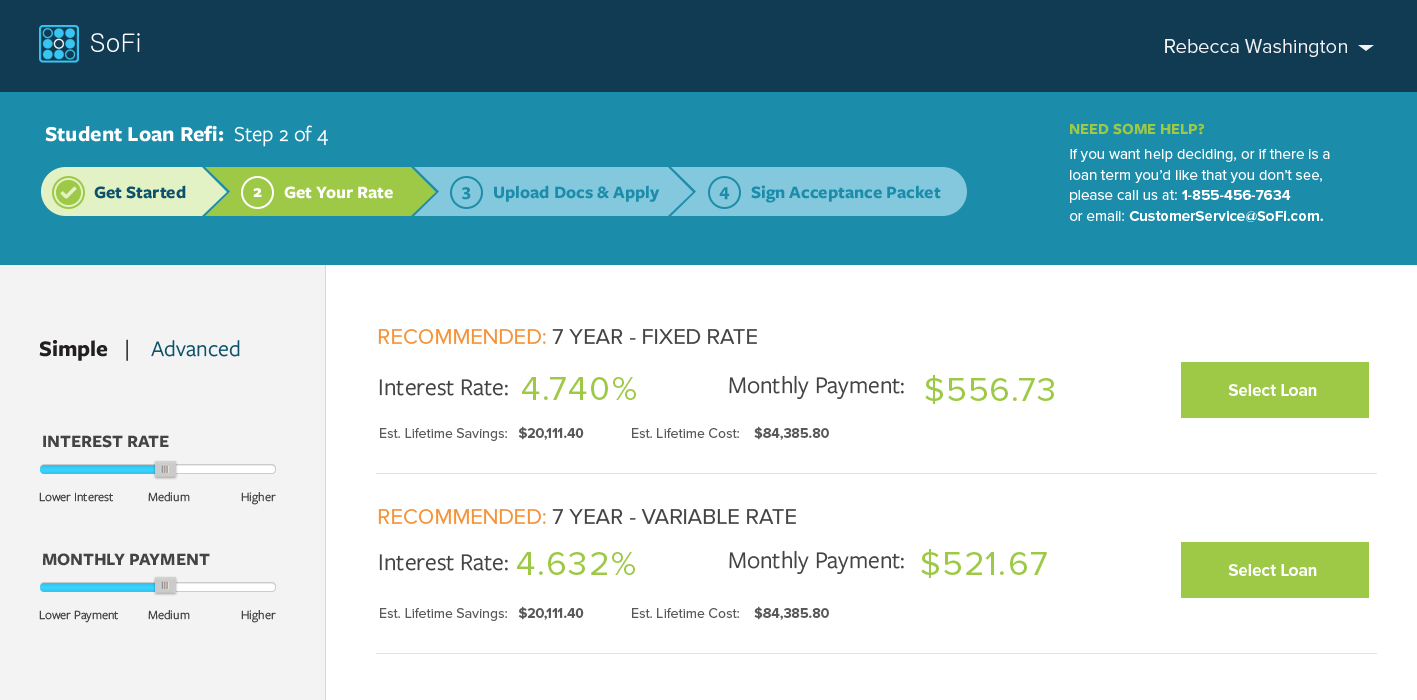
<style>
.page{position:relative;width:1417px;height:700px;background:#ffffff}
.page>*{position:absolute;margin:0}
.t1{font:20px "ProximaNova-Regular";color:#f3f3f3}
.t2{font:22.1px "FreightSansProBold-Regular";color:#ffffff}
.t3{font:22.1px "FreightSansProBook-Regular";color:#ffffff}
.t4{font:16px "FreightSansProBold-Regular";color:#9dc947;text-transform:uppercase}
.t5{font:15px/20.5px "ProximaNova-Regular";color:#ffffff}
.t6{font:15px/20.5px "ProximaNova-Bold";color:#ffffff}
.t7{font:18.1px "FreightSansProBold-Regular";color:#0c526a}
.t8{font:18.1px "FreightSansProBold-Regular";color:#1b8caa}
.t9{font:18.1px "FreightSansProBold-Regular";letter-spacing:0.04em;color:#ffffff}
.t10{font:18.1px "FreightSansProBold-Regular";color:#ffffff}
.t11{font:18.1px "FreightSansProBold-Regular";letter-spacing:0.04em;color:#1b8caa}
.t12{font:22px "ProximaNova-Regular";color:#444444}
.t13{font:22px "ProximaNova-Regular";color:#f59339;text-transform:uppercase}
.t14{font:23px "FreightSansProBook-Regular";color:#0c526a}
.t15{font:23px "FreightSansProBold-Regular";color:#231f20}
.t16{font:23px "FreightSansProBook-Regular";color:#231f20}
.t17{font:34.6px "ProximaNova-Regular";letter-spacing:0.04em;color:#9dc947}
.t18{font:24.9px "FreightSansProBook-Regular";color:#444444}
.t19{font:17px "ProximaNova-Bold";color:#ffffff}
.t20{font:18px "FreightSansProBold-Regular";color:#444444}
.t21{font:14px "ProximaNova-Regular";color:#595959}
.t22{font:14px "ProximaNova-Bold";color:#595959}
.t23{font:13px "FreightSansProBook-Regular";color:#444444}
</style>
<div class="page">
<p class="t1" style="left:1165px;top:39px;width:182px;height:18px">Rebecca Washington</p>
<p class="t2" style="left:45px;top:125px;width:283px;height:22px">Student Loan Refi:  <span class="t3">Step 2 of 4</span></p>
<p class="t4" style="left:1070px;top:123px;width:135px;height:12px">need some help?</p>
<p class="t5" style="left:1070px;top:149px;width:260px;height:73px">If you want help deciding, or if there is a loan term you’d like that you don’t see, please call us at: <span class="t6">1-855-456-7634</span> <br>or email: <span class="t6">CustomerService@SoFi.com.</span></p>
<p class="t7" style="left:94px;top:185px;width:92px;height:14px">Get Started</p>
<p class="t8" style="left:494px;top:185px;width:166px;height:17px">Upload Docs &amp; Apply</p>
<p class="t8" style="left:751px;top:185px;width:190px;height:18px">Sign Acceptance Packet</p>
<p class="t9" style="left:253px;top:188px;width:9px;height:9px">2</p>
<p class="t10" style="left:284px;top:186px;width:109px;height:13px">Get Your Rate</p>
<p class="t11" style="left:462px;top:187px;width:9px;height:13px">3</p>
<p class="t11" style="left:719px;top:187px;width:11px;height:13px">4</p>
<p class="t12" style="left:378px;top:329px;width:379px;height:15px"><span class="t13">Recommended: </span>7 YEAR - FIXED RATE</p>
<p class="t14" style="left:39px;top:339px;width:201px;height:22px"><span class="t15">Simple </span><span class="t16">  |    </span>Advanced</p>
<p class="t17" style="left:522px;top:377px;width:114px;height:23px">4.740%</p>
<p class="t18" style="left:729px;top:375px;width:175px;height:24px">Monthly Payment:</p>
<p class="t17" style="left:925px;top:375px;width:129px;height:29px">$556.73</p>
<p class="t18" style="left:379px;top:379px;width:129px;height:17px">Interest Rate:</p>
<p class="t19" style="left:1228px;top:384px;width:89px;height:12px">Select Loan</p>
<p class="t20" style="left:43px;top:435px;width:126px;height:13px">INTEREST RATE</p>
<p class="t21" style="left:380px;top:426px;width:449px;height:15px">Est. Lifetime Savings:   <span class="t22">$20,111.40</span>             Est. Lifetime Cost:    <span class="t22">$84,385.80</span></p>
<p class="t23" style="left:39px;top:492px;width:74px;height:10px">Lower Interest</p>
<p class="t23" style="left:148px;top:492px;width:42px;height:10px">Medium</p>
<p class="t23" style="left:241px;top:492px;width:35px;height:13px">Higher</p>
<p class="t12" style="left:378px;top:509px;width:418px;height:15px"><span class="t13">Recommended: </span>7 YEAR - VARIABLE RATE</p>
<p class="t20" style="left:43px;top:553px;width:167px;height:13px">MONTHLY PAYMENT</p>
<p class="t18" style="left:379px;top:554px;width:129px;height:17px">Interest Rate:</p>
<p class="t17" style="left:517px;top:552px;width:118px;height:23px">4.632%</p>
<p class="t18" style="left:729px;top:550px;width:175px;height:24px">Monthly Payment:</p>
<p class="t17" style="left:921px;top:549px;width:126px;height:29px">$521.67</p>
<p class="t19" style="left:1228px;top:564px;width:89px;height:12px">Select Loan</p>
<p class="t21" style="left:380px;top:606px;width:449px;height:15px">Est. Lifetime Savings:   <span class="t22">$20,111.40</span>             Est. Lifetime Cost:    <span class="t22">$84,385.80</span></p>
<p class="t23" style="left:39px;top:610px;width:79px;height:13px">Lower Payment</p>
<p class="t23" style="left:148px;top:610px;width:42px;height:10px">Medium</p>
<p class="t23" style="left:241px;top:610px;width:35px;height:13px">Higher</p>
</div>
